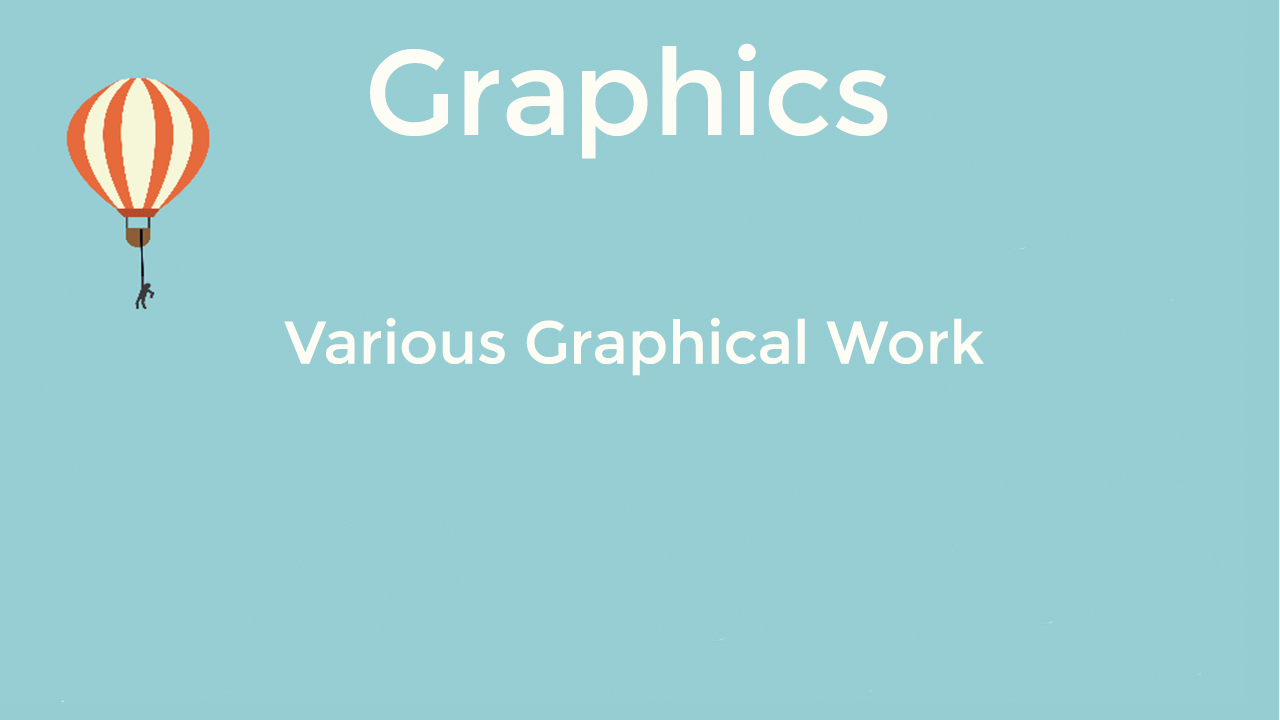
<style>
.page{position:relative;width:1280px;height:720px;background:#97ced3}
.page>*{position:absolute;margin:0}
.t1{font:120px "Montserrat-Regular";color:#fefdf5}
.t2{font:60px "Montserrat-Regular";color:#fefdf5}
</style>
<div class="page">
<p class="t1" style="left:370px;top:43px;width:518px;height:116px">Graphics</p>
<p class="t2" style="left:284px;top:317px;width:700px;height:59px">Various Graphical Work</p>
</div>
